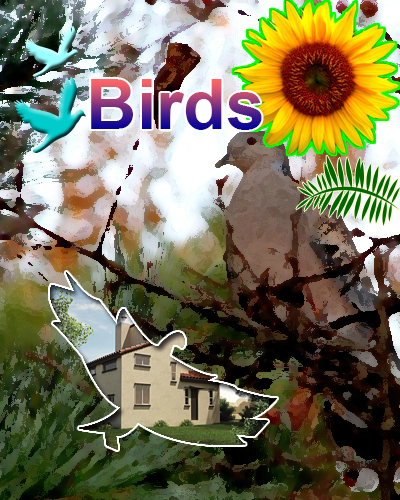
<style>
.page{position:relative;width:400px;height:500px}
.page>*{position:absolute;margin:0}
.t1{font:69.7px "Arial-BoldMT"}
</style>
<div class="page">
<p class="t1" style="left:91px;top:79px;width:171px;height:51px">Birds</p>
</div>
